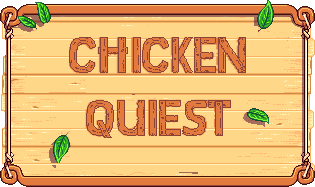
<style>
.page{position:relative;width:315px;height:187px;background:#ffd789}
.page>*{position:absolute;margin:0}
.t1{font:52.1px "StardewValley-Regular";color:#8c4337;text-transform:uppercase}
</style>
<div class="page">
<p class="t1" style="left:69px;top:37px;width:177px;height:101px;text-align:center">Chicken<br>Quiest</p>
</div>
